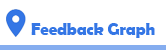
<style>
.page{position:relative;width:166px;height:50px;background:#ffffff}
.page>*{position:absolute;margin:0}
.t1{font:16.7px "BerlinSansFBDemi-Bold";color:#3476e5}
</style>
<div class="page">
<p class="t1" style="left:31px;top:23px;width:124px;height:15px">Feedback Graph</p>
</div>
